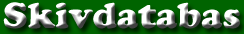
<style>
.page{position:relative;width:244px;height:34px;background:#006400}
.page>*{position:absolute;margin:0}
.t1{font:36px "CooperBlackStd"}
</style>
<div class="page">
<p class="t1" style="left:3px;top:2px;width:237px;height:27px">Skivdatabas</p>
</div>
